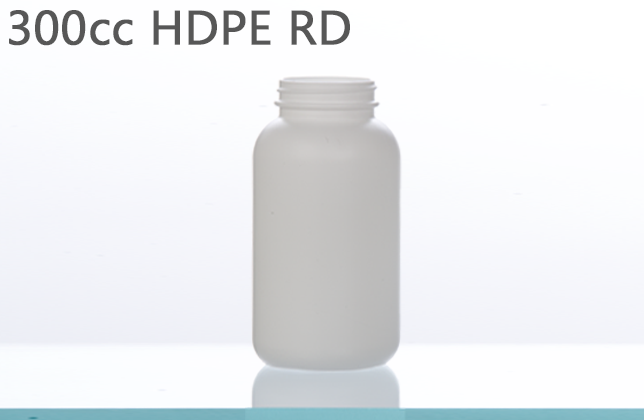
<style>
.page{position:relative;width:644px;height:420px}
.page>*{position:absolute;margin:0}
.t1{font:48px "Gadugi";color:#575757;font-weight:bold}
</style>
<div class="page">
<p class="t1" style="left:9px;top:10px;width:341px;height:36px">300cc HDPE RD</p>
</div>
